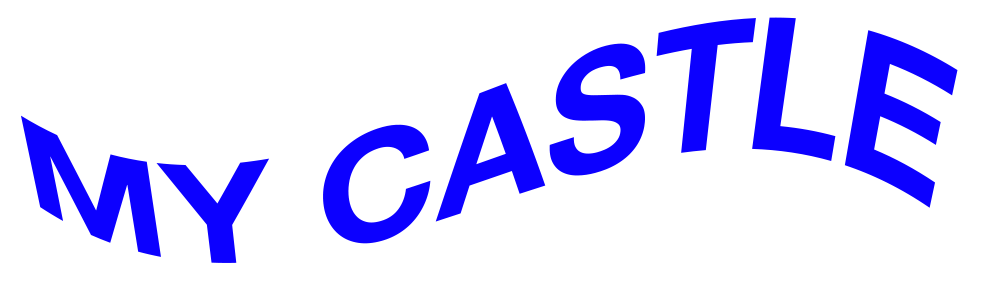
<style>
.page{position:relative;width:981px;height:289px;background:#ffffff}
.page>*{position:absolute;margin:0}
.t1{font:159px "HelveticaNeue-Bold";color:#0c00ff;text-transform:uppercase}
</style>
<div class="page">
<p class="t1" style="left:21px;top:17px;width:937px;height:246px">MY CASTLE</p>
</div>
